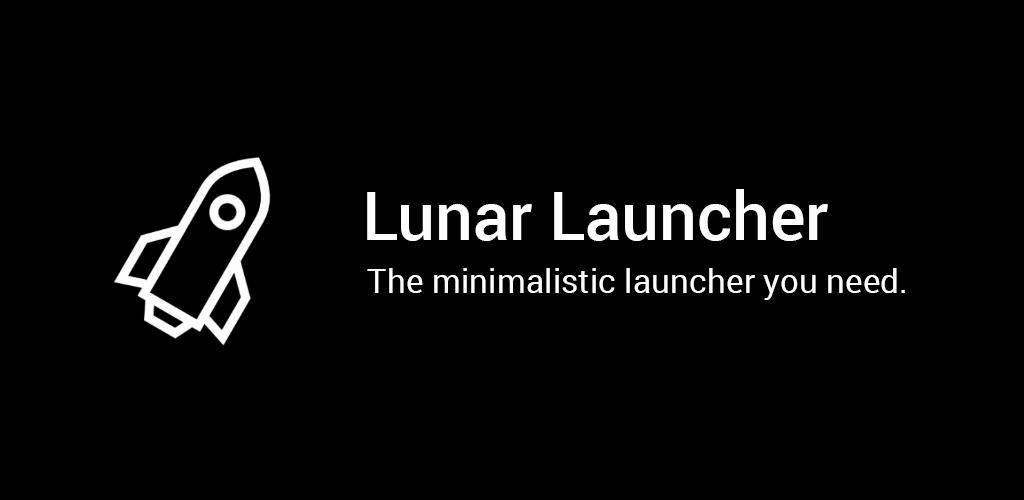
<style>
.page{position:relative;width:1024px;height:500px;background:#000000}
.page>*{position:absolute;margin:0}
.t1{font:66.8px "Roboto-Medium";color:#ffffff}
.t2{font:33.4px "Roboto-Regular";color:#ffffff}
</style>
<div class="page">
<p class="t1" style="left:367px;top:189px;width:461px;height:52px">Lunar Launcher</p>
<p class="t2" style="left:367px;top:268px;width:538px;height:32px">The minimalistic launcher you need.</p>
</div>
